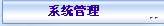
<style>
.page{position:relative;width:164px;height:26px}
.page>*{position:absolute;margin:0}
.t1{font:12px "NSimSun";color:#330099;font-weight:bold}
</style>
<div class="page">
<p class="t1" style="left:48px;top:5px;width:51px;height:11px">系统管理</p>
</div>
